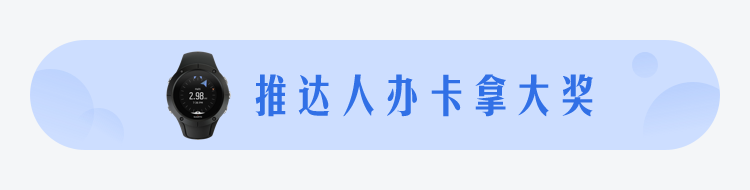
<style>
.page{position:relative;width:750px;height:190px;background:#f4f6f8}
.page>*{position:absolute;margin:0}
.t1{font:44px "FZMHJW--GB1-0";color:#3170e6}
</style>
<div class="page">
<p class="t1" style="left:255px;top:74px;width:338px;height:43px">推达人办卡拿大奖</p>
</div>
